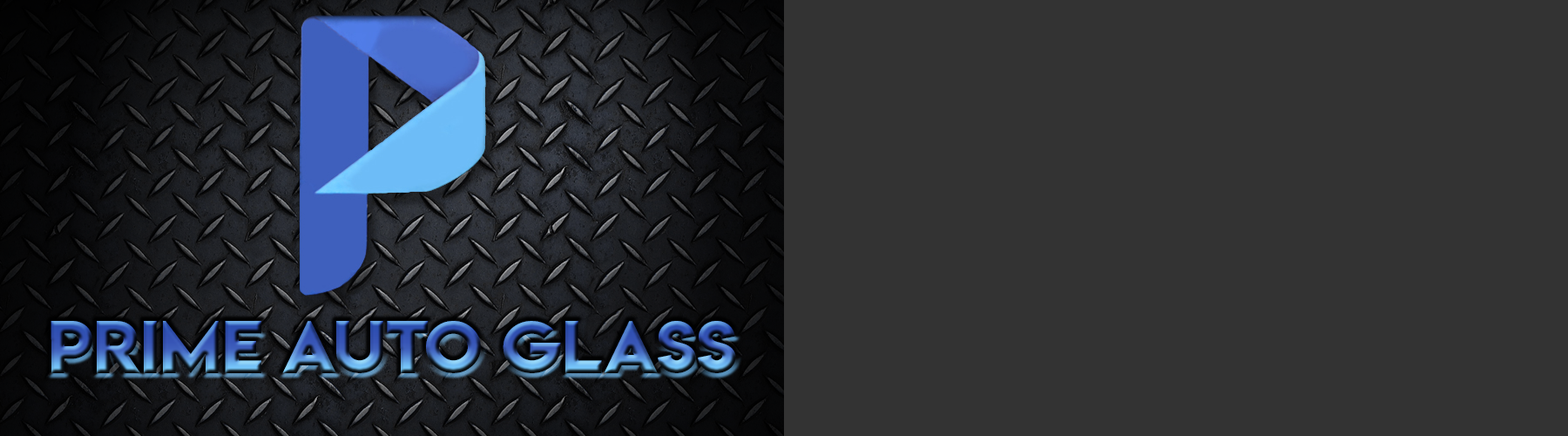
<style>
.page{position:relative;width:1568px;height:436px;background:#333333}
.page>*{position:absolute;margin:0}
.t1{font:66.3px "LemonMilkbold"}
</style>
<div class="page">
<p class="t1" style="left:51px;top:321px;width:685px;height:52px">Prime Auto Glass</p>
</div>
